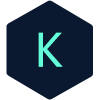
<style>
.page{position:relative;width:100px;height:100px;background:#0a192f}
.page>*{position:absolute;margin:0}
.t1{font:48px "Ebrima";color:#64ffda}
</style>
<div class="page">
<p class="t1" style="left:38px;top:32px;width:25px;height:35px">K</p>
</div>
